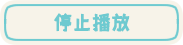
<style>
.page{position:relative;width:183px;height:45px;background:#f7f3e9}
.page>*{position:absolute;margin:0}
.t1{font:12px "shetumodengxiaofangti";color:#6ecad0;font-weight:bold;scale:0.94 1}
</style>
<div class="page">
<p class="t1" style="left:54px;top:13px;width:76px;height:19px">停止播放</p>
</div>
